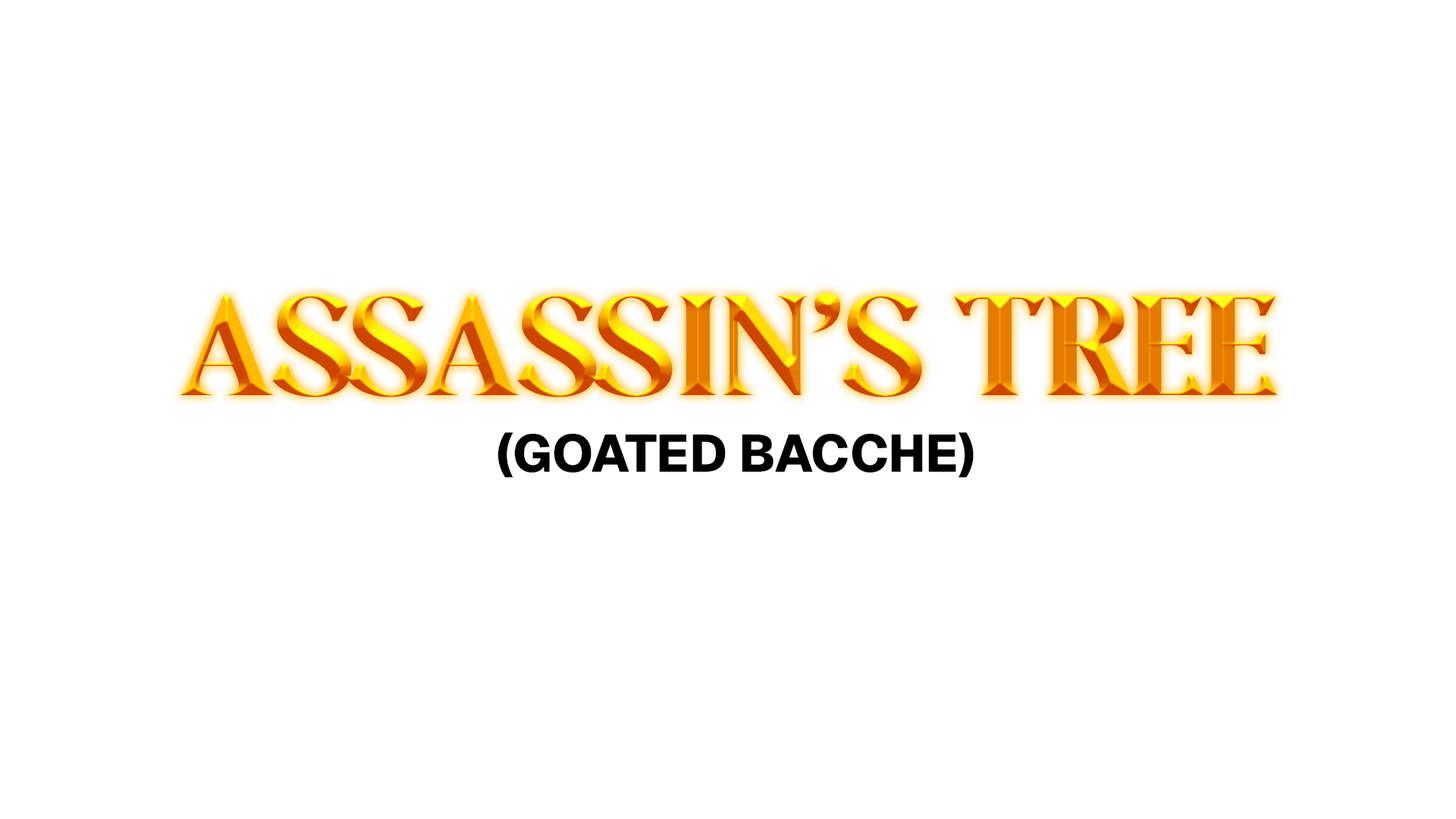
<style>
.page{position:relative;width:1456px;height:819px;background:#ffffff}
.page>*{position:absolute;margin:0}
.t1{font:147.8px "FreganSerifBold"}
.t2{font:52.3px "Geist-ExtraBold";color:#000000}
</style>
<div class="page">
<p class="t1" style="left:179px;top:293px;width:1099px;height:104px">ASSASSIN’S TREE</p>
<p class="t2" style="left:497px;top:432px;width:477px;height:46px">(GOATED BACCHE)</p>
</div>
